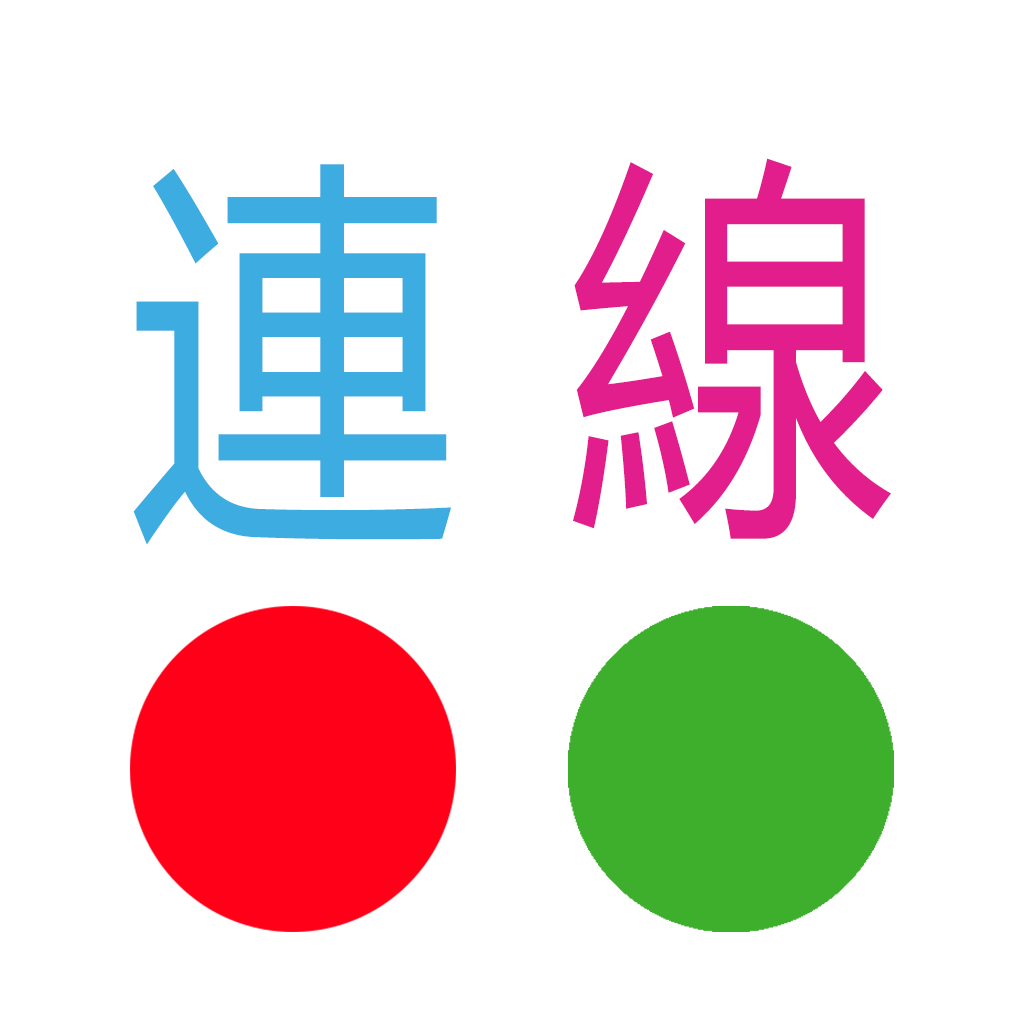
<style>
.page{position:relative;width:1024px;height:1024px;background:#ffffff}
.page>*{position:absolute;margin:0}
.t1{font:399px "MicrosoftYaHei";color:#e21d8c;scale:0.82 1}
.t2{font:403.5px "MicrosoftYaHei";color:#3dace0;scale:0.81 1}
</style>
<div class="page">
<p class="t1" style="left:573px;top:158px;width:318px;height:381px">線</p>
<p class="t2" style="left:133px;top:164px;width:318px;height:381px">連</p>
</div>
